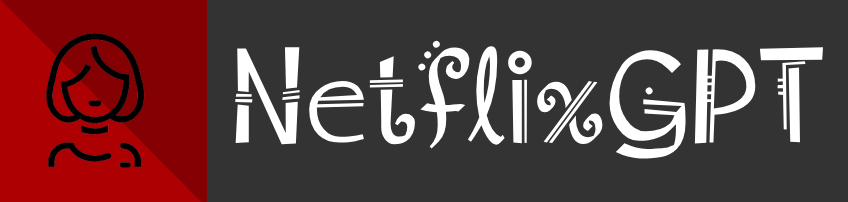
<style>
.page{position:relative;width:848px;height:202px;background:#333333}
.page>*{position:absolute;margin:0}
.t1{font:135.4px "Amadeus-Regular";color:#ffffff}
</style>
<div class="page">
<p class="t1" style="left:235px;top:40px;width:588px;height:119px">NetflixGPT</p>
</div>
